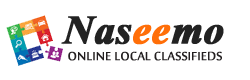
<style>
.page{position:relative;width:250px;height:80px;background:#ffffff}
.page>*{position:absolute;margin:0}
.t1{font:50px "Vijaya-Bold";color:#222222;font-weight:bold}
.t2{font:50px "Vijaya-Bold";color:#ff6e08;font-weight:bold}
.t3{font:16px "SakkalMajalla";color:#231f20;font-weight:bold}
</style>
<div class="page">
<p class="t1" style="left:61px;top:16px;width:163px;height:29px">Nas<span class="t2">ee</span>mo</p>
<p class="t3" style="left:68px;top:51px;width:154px;height:10px">ONLINE LOCAL CLASSIFIEDS</p>
</div>
